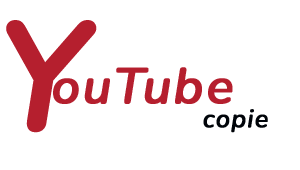
<style>
.page{position:relative;width:300px;height:170px;background:#ffffff}
.page>*{position:absolute;margin:0}
.t1{font:150px "Nunito-SemiBoldItalic";letter-spacing:0.025em;color:#b51f2e;font-weight:bold}
.t2{font:50px "Nunito-SemiBoldItalic";letter-spacing:0.025em;color:#b51f2e;font-weight:bold}
.t3{font:25px "Nunito-SemiBoldItalic";letter-spacing:0.025em;color:#000409;font-weight:bold}
</style>
<div class="page">
<p class="t1" style="left:6px;top:20px;width:91px;height:113px">Y</p>
<p class="t2" style="left:53px;top:67px;width:180px;height:37px">ouTube</p>
<p class="t3" style="left:203px;top:109px;width:65px;height:24px">copie</p>
</div>
